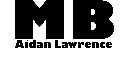
<style>
.page{position:relative;width:128px;height:64px;background:#ffffff}
.page>*{position:absolute;margin:0}
.t1{font:53.1px "GillSans-UltraBold";letter-spacing:0.002em;color:#000000}
.t2{font:10px "GillSans-UltraBold";letter-spacing:0.002em;color:#000000}
</style>
<div class="page">
<p class="t1" style="left:15px;top:0px;width:99px;height:39px">MB</p>
<p class="t2" style="left:15px;top:40px;width:97px;height:8px">Aidan Lawrence</p>
</div>
